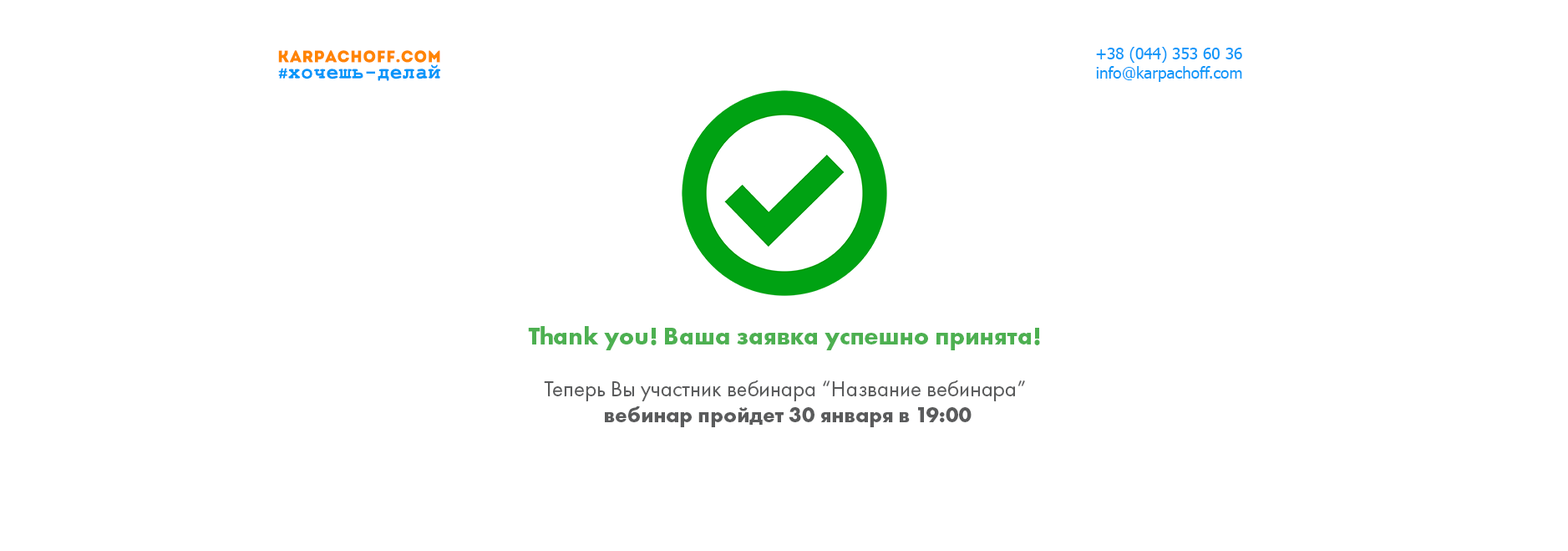
<style>
.page{position:relative;width:1568px;height:551px;background:#ffffff}
.page>*{position:absolute;margin:0}
.t1{font:16.3px "Intro";letter-spacing:0.03em;color:#ff8400}
.t2{font:15.9px "Tahoma";color:#0c98f9}
.t3{font:20.6px "CourierNewPS-BoldMT";letter-spacing:0.03em;color:#0295f9}
.t4{font:14.3px "Ubuntu-Medium";letter-spacing:0.03em;color:#0295f9}
.t5{font:25.1px "FuturaPT-Bold";color:#4db051}
.t6{font:22.6px "FuturaPT-Book";color:#5a5b5c}
.t7{font:21.7px "FuturaPT-Bold";color:#5a5b5c}
</style>
<div class="page">
<p class="t1" style="left:278px;top:50px;width:162px;height:13px">karpachoff.com</p>
<p class="t2" style="left:1096px;top:47px;width:146px;height:35px;text-align:right">+38 (044) 353 60 36<br>info@karpachoff.com</p>
<p class="t3" style="left:278px;top:64px;width:163px;height:17px"><span class="t4">#</span>хочешь-делай</p>
<p class="t5" style="left:528px;top:326px;width:512px;height:24px">Thank you! Ваша заявка успешно принята!</p>
<p class="t6" style="left:544px;top:380px;width:481px;height:47px;text-align:center">Теперь Вы участник вебинара “Название вебинара” <br><span class="t7">вебинар пройдет 30 января в 19:00</span></p>
</div>
